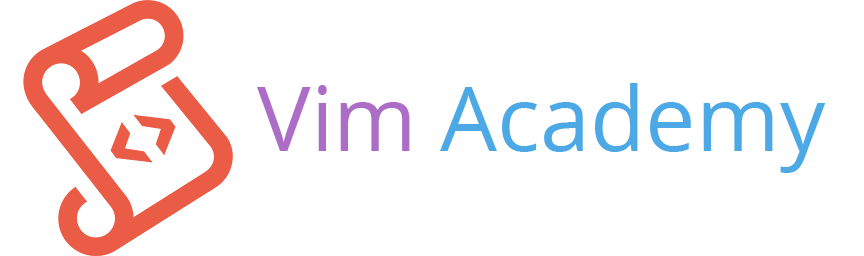
<style>
.page{position:relative;width:864px;height:256px;background:#ffffff}
.page>*{position:absolute;margin:0}
.t1{font:90px "OpenSans";color:#4da9e5}
.t2{font:90px "OpenSans";color:#ac6dc7}
</style>
<div class="page">
<p class="t1" style="left:257px;top:83px;width:569px;height:90px"><span class="t2">Vim</span> Academy</p>
</div>
